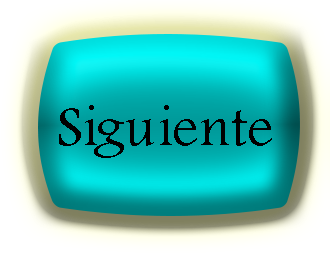
<style>
.page{position:relative;width:330px;height:263px}
.page>*{position:absolute;margin:0}
.t1{font:58.2px "FootlightMTLight";color:#000000}
</style>
<div class="page">
<p class="t1" style="left:59px;top:105px;width:213px;height:53px">Siguiente</p>
</div>
